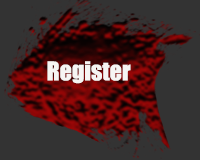
<style>
.page{position:relative;width:200px;height:160px;background:#333333}
.page>*{position:absolute;margin:0}
.t1{font:24px "Impact";color:#f6f5f3}
</style>
<div class="page">
<p class="t1" style="left:47px;top:61px;width:84px;height:23px">Register</p>
</div>
